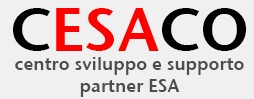
<style>
.page{position:relative;width:254px;height:99px;background:#f0f0f0}
.page>*{position:absolute;margin:0}
.t1{font:61px "StoneSansSemITCTTSemi";color:#ff0000}
.t2{font:61px "StoneSansSemITCTTSemi";color:#000000}
.t3{font:18px "StoneSansSemITCTTSemi";color:#4d4d4d}
</style>
<div class="page">
<p class="t1" style="left:13px;top:8px;width:234px;height:43px"><span class="t2">C</span>ESA<span class="t2">CO</span></p>
<p class="t3" style="left:15px;top:57px;width:229px;height:40px;text-align:center">centro sviluppo e supporto<br>partner ESA</p>
</div>
